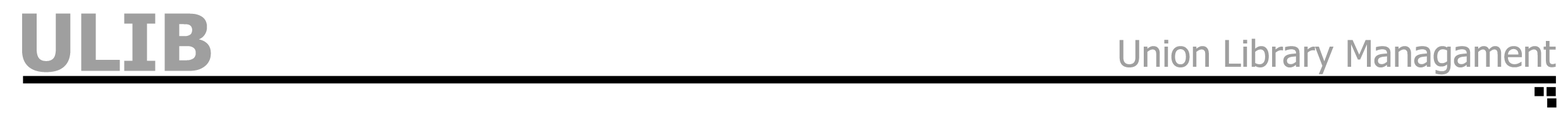
<style>
.page{position:relative;width:1568px;height:126px;background:#ffffff}
.page>*{position:absolute;margin:0}
.t1{font:79px "Tahoma-Bold";color:#9f9f9f}
.t2{font:36.9px "Tahoma";color:#9f9f9f}
</style>
<div class="page">
<p class="t1" style="left:22px;top:13px;width:189px;height:60px">ULIB</p>
<p class="t2" style="left:1119px;top:39px;width:437px;height:36px">Union Library Managament</p>
</div>
